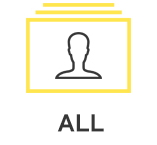
<style>
.page{position:relative;width:157px;height:145px;background:#ffffff}
.page>*{position:absolute;margin:0}
.t1{font:24px "Arial-BoldMT";color:#363636}
</style>
<div class="page">
<p class="t1" style="left:57px;top:114px;width:47px;height:18px">ALL</p>
</div>
